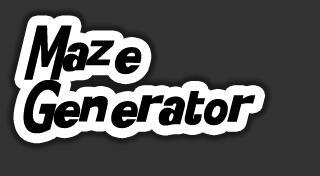
<style>
.page{position:relative;width:320px;height:176px;background:#333333}
.page>*{position:absolute;margin:0}
.t1{font:45px "KittyKatt";color:#000000}
</style>
<div class="page">
<p class="t1" style="left:23px;top:25px;width:233px;height:109px">Maze Generator</p>
</div>
